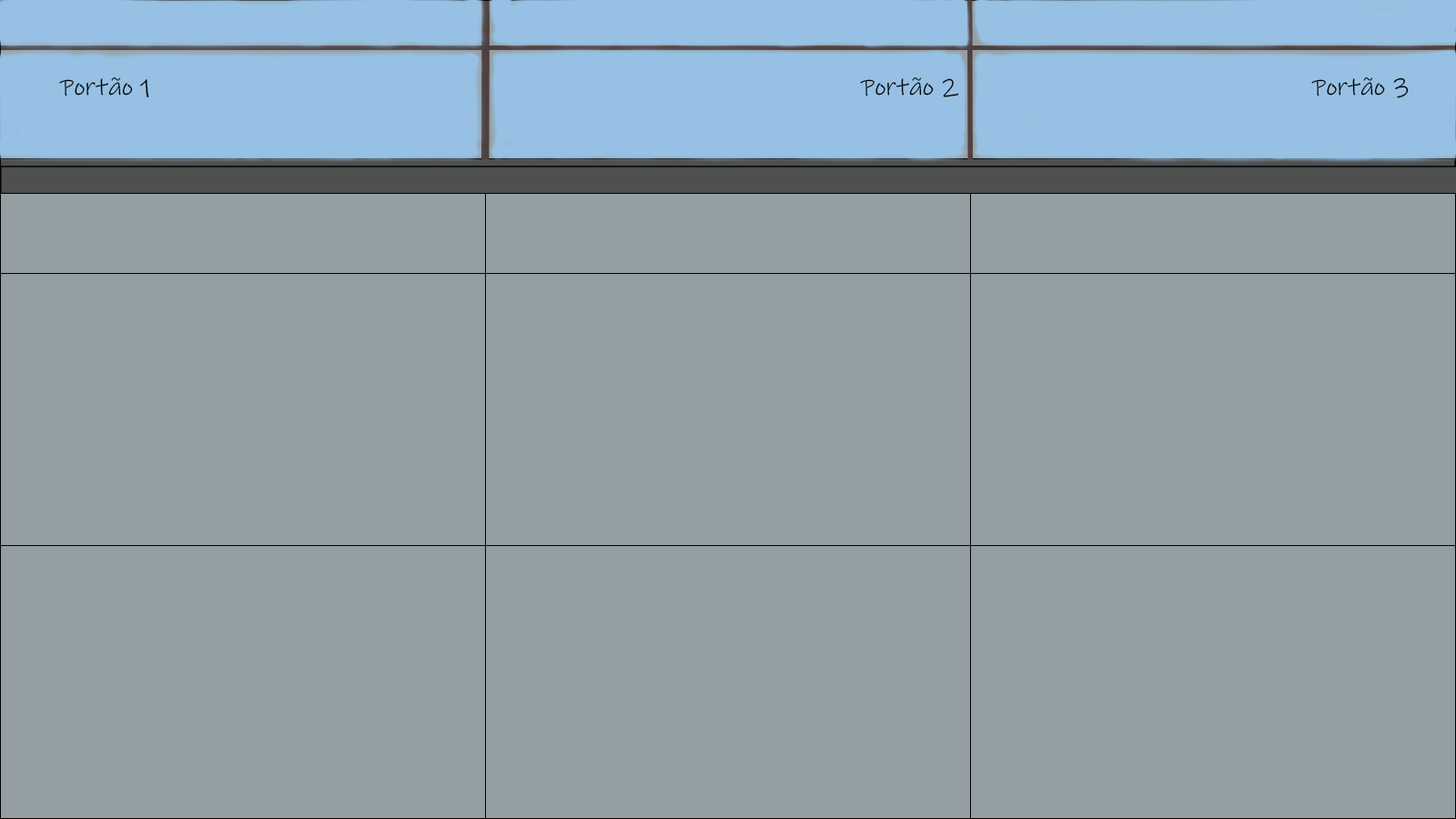
<style>
.page{position:relative;width:1456px;height:819px;background:#949fa3}
.page>*{position:absolute;margin:0}
.t1{font:25.5px "InkFree";color:#000000}
</style>
<div class="page">
<p class="t1" style="left:59px;top:77px;width:90px;height:21px">Portão 1</p>
<p class="t1" style="left:860px;top:77px;width:99px;height:20px">Portão 2</p>
<p class="t1" style="left:1311px;top:77px;width:98px;height:21px">Portão 3</p>
</div>
